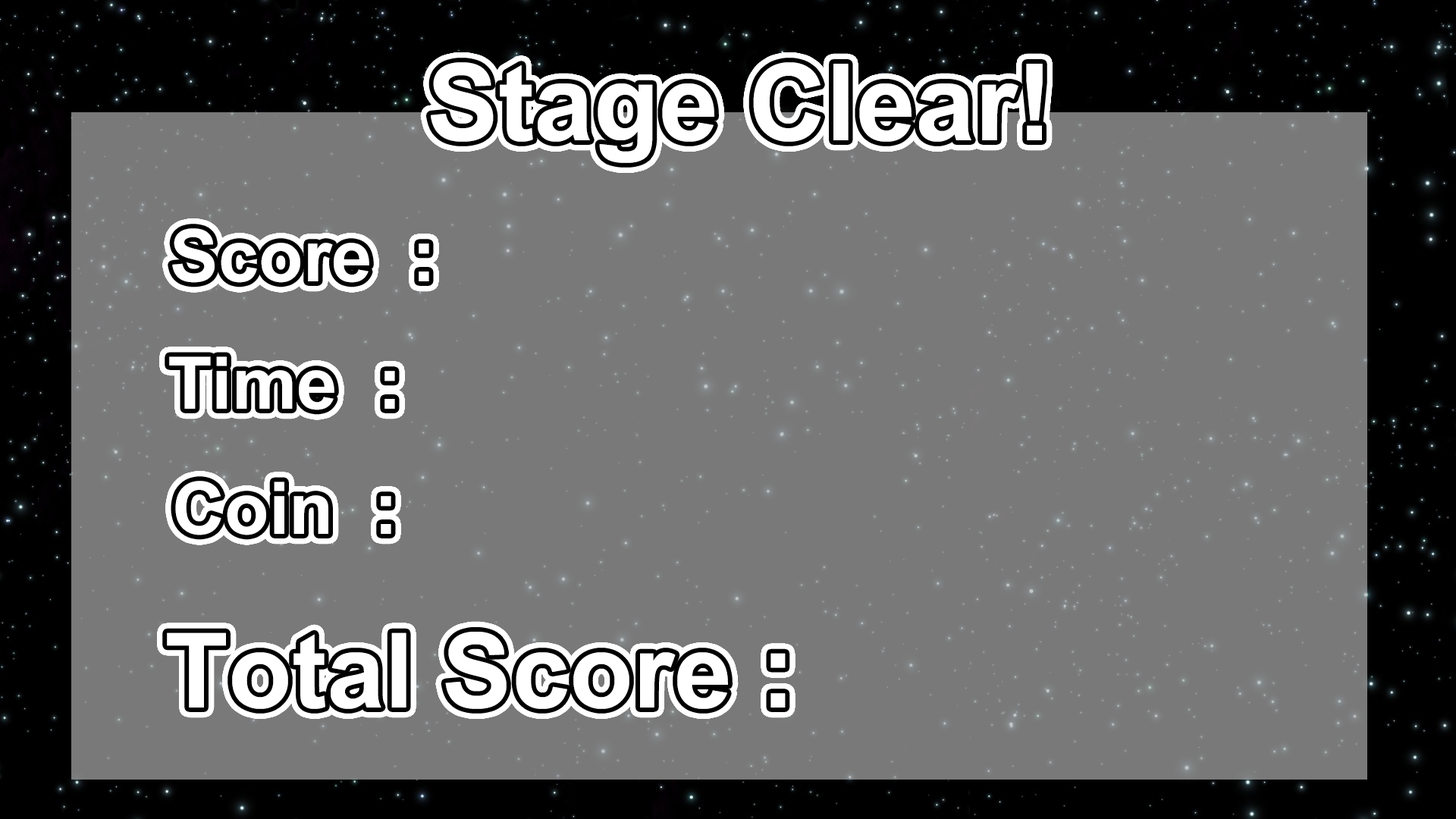
<style>
.page{position:relative;width:1456px;height:819px;background:#797979}
.page>*{position:absolute;margin:0}
.t1{font:106.9px "Arial-BoldMT";color:#ffffff}
.t2{font:72.5px "Arial-BoldMT";color:#ffffff}
.t3{font:103.8px "Arial-BoldMT";color:#ffffff}
</style>
<div class="page">
<p class="t1" style="left:431px;top:62px;width:612px;height:101px">Stage Clear!</p>
<p class="t2" style="left:172px;top:228px;width:257px;height:55px">Score  :</p>
<p class="t2" style="left:169px;top:356px;width:226px;height:54px">Time  :</p>
<p class="t2" style="left:175px;top:481px;width:216px;height:54px">Coin  :</p>
<p class="t3" style="left:167px;top:632px;width:619px;height:77px">Total Score :</p>
</div>
